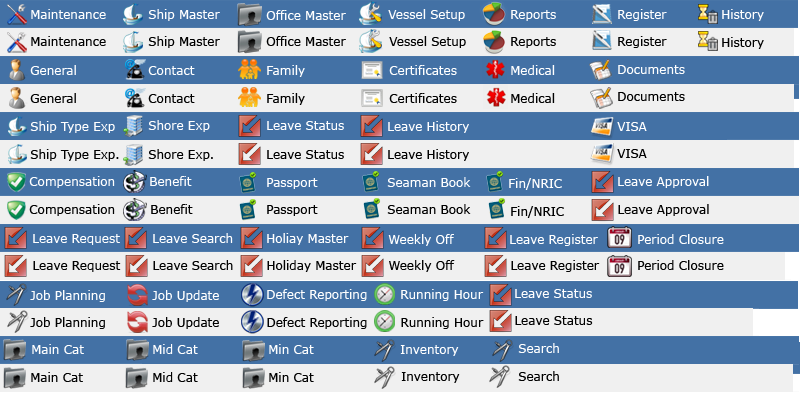
<style>
.page{position:relative;width:800px;height:400px;background:#f0f0f0}
.page>*{position:absolute;margin:0}
.t1{font:12px "Verdana";color:#ffffff}
.t2{font:12px "Verdana";color:#010101}
.t3{font:12px "Verdana";color:#000000}
</style>
<div class="page">
<p class="t1" style="left:31px;top:9px;width:75px;height:10px">Maintenance</p>
<p class="t1" style="left:148px;top:9px;width:72px;height:12px">Ship Master</p>
<p class="t1" style="left:266px;top:10px;width:80px;height:10px">Office Master</p>
<p class="t1" style="left:388px;top:9px;width:77px;height:12px">Vessel Setup</p>
<p class="t1" style="left:511px;top:10px;width:45px;height:11px">Reports</p>
<p class="t1" style="left:618px;top:9px;width:49px;height:12px">Register</p>
<p class="t1" style="left:722px;top:9px;width:42px;height:12px">History</p>
<p class="t2" style="left:31px;top:36px;width:75px;height:10px">Maintenance</p>
<p class="t3" style="left:148px;top:36px;width:72px;height:12px">Ship Master</p>
<p class="t3" style="left:266px;top:36px;width:80px;height:10px">Office Master</p>
<p class="t3" style="left:389px;top:36px;width:77px;height:12px">Vessel Setup</p>
<p class="t2" style="left:511px;top:37px;width:45px;height:11px">Reports</p>
<p class="t3" style="left:618px;top:36px;width:49px;height:12px">Register</p>
<p class="t3" style="left:722px;top:37px;width:42px;height:12px">History</p>
<p class="t1" style="left:30px;top:65px;width:46px;height:10px">General</p>
<p class="t1" style="left:267px;top:65px;width:38px;height:12px">Family</p>
<p class="t1" style="left:389px;top:65px;width:68px;height:10px">Certificates</p>
<p class="t1" style="left:511px;top:65px;width:44px;height:10px">Medical</p>
<p class="t1" style="left:618px;top:65px;width:67px;height:9px">Documents</p>
<p class="t1" style="left:148px;top:66px;width:47px;height:9px">Contact</p>
<p class="t2" style="left:30px;top:93px;width:46px;height:10px">General</p>
<p class="t3" style="left:148px;top:94px;width:47px;height:9px">Contact</p>
<p class="t3" style="left:267px;top:93px;width:38px;height:12px">Family</p>
<p class="t3" style="left:389px;top:93px;width:68px;height:10px">Certificates</p>
<p class="t2" style="left:511px;top:93px;width:44px;height:10px">Medical</p>
<p class="t3" style="left:618px;top:92px;width:67px;height:9px">Documents</p>
<p class="t1" style="left:30px;top:121px;width:85px;height:12px">Ship Type Exp</p>
<p class="t1" style="left:148px;top:120px;width:62px;height:12px">Shore Exp</p>
<p class="t1" style="left:267px;top:121px;width:77px;height:9px">Leave Status</p>
<p class="t1" style="left:388px;top:121px;width:81px;height:12px">Leave History</p>
<p class="t1" style="left:617px;top:122px;width:30px;height:9px">VISA</p>
<p class="t2" style="left:30px;top:149px;width:89px;height:12px">Ship Type Exp.</p>
<p class="t3" style="left:148px;top:149px;width:65px;height:12px">Shore Exp.</p>
<p class="t3" style="left:267px;top:150px;width:77px;height:9px">Leave Status</p>
<p class="t3" style="left:388px;top:149px;width:81px;height:12px">Leave History</p>
<p class="t3" style="left:617px;top:149px;width:30px;height:9px">VISA</p>
<p class="t1" style="left:29px;top:176px;width:86px;height:12px">Compensation</p>
<p class="t1" style="left:150px;top:176px;width:42px;height:10px">Benefit</p>
<p class="t1" style="left:267px;top:178px;width:51px;height:11px">Passport</p>
<p class="t1" style="left:387px;top:177px;width:84px;height:10px">Seaman Book</p>
<p class="t1" style="left:509px;top:178px;width:53px;height:12px">Fin/NRIC</p>
<p class="t1" style="left:618px;top:176px;width:91px;height:12px">Leave Approval</p>
<p class="t2" style="left:29px;top:204px;width:86px;height:12px">Compensation</p>
<p class="t3" style="left:151px;top:204px;width:42px;height:10px">Benefit</p>
<p class="t3" style="left:267px;top:205px;width:51px;height:11px">Passport</p>
<p class="t3" style="left:387px;top:204px;width:84px;height:10px">Seaman Book</p>
<p class="t3" style="left:511px;top:206px;width:53px;height:12px">Fin/NRIC</p>
<p class="t2" style="left:618px;top:204px;width:91px;height:12px">Leave Approval</p>
<p class="t1" style="left:153px;top:233px;width:80px;height:10px">Leave Search</p>
<p class="t1" style="left:267px;top:233px;width:82px;height:12px">Holiay Master</p>
<p class="t1" style="left:33px;top:234px;width:87px;height:11px">Leave Request</p>
<p class="t1" style="left:388px;top:234px;width:66px;height:12px">Weekly Off</p>
<p class="t1" style="left:510px;top:234px;width:88px;height:12px">Leave Register</p>
<p class="t1" style="left:638px;top:234px;width:86px;height:10px">Period Closure</p>
<p class="t2" style="left:33px;top:261px;width:88px;height:11px">Leave Request</p>
<p class="t2" style="left:153px;top:260px;width:80px;height:10px">Leave Search</p>
<p class="t2" style="left:267px;top:260px;width:90px;height:12px">Holiday Master</p>
<p class="t2" style="left:389px;top:260px;width:66px;height:12px">Weekly Off</p>
<p class="t2" style="left:511px;top:260px;width:89px;height:12px">Leave Register</p>
<p class="t2" style="left:638px;top:260px;width:86px;height:10px">Period Closure</p>
<p class="t1" style="left:30px;top:290px;width:75px;height:12px">Job Planning</p>
<p class="t1" style="left:152px;top:290px;width:67px;height:12px">Job Update</p>
<p class="t1" style="left:267px;top:289px;width:100px;height:12px">Defect Reporting</p>
<p class="t1" style="left:401px;top:289px;width:83px;height:12px">Running Hour</p>
<p class="t1" style="left:515px;top:289px;width:77px;height:9px">Leave Status</p>
<p class="t2" style="left:30px;top:317px;width:75px;height:12px">Job Planning</p>
<p class="t3" style="left:152px;top:317px;width:67px;height:12px">Job Update</p>
<p class="t2" style="left:267px;top:317px;width:100px;height:12px">Defect Reporting</p>
<p class="t2" style="left:401px;top:317px;width:83px;height:12px">Running Hour</p>
<p class="t2" style="left:515px;top:316px;width:78px;height:9px">Leave Status</p>
<p class="t1" style="left:32px;top:344px;width:52px;height:10px">Main Cat</p>
<p class="t1" style="left:153px;top:344px;width:45px;height:10px">Mid Cat</p>
<p class="t1" style="left:269px;top:344px;width:45px;height:10px">Min Cat</p>
<p class="t1" style="left:400px;top:345px;width:59px;height:11px">Inventory</p>
<p class="t1" style="left:518px;top:343px;width:41px;height:10px">Search</p>
<p class="t2" style="left:31px;top:372px;width:52px;height:10px">Main Cat</p>
<p class="t2" style="left:153px;top:372px;width:45px;height:10px">Mid Cat</p>
<p class="t2" style="left:269px;top:372px;width:45px;height:10px">Min Cat</p>
<p class="t2" style="left:401px;top:372px;width:59px;height:11px">Inventory</p>
<p class="t2" style="left:518px;top:371px;width:41px;height:10px">Search</p>
</div>
